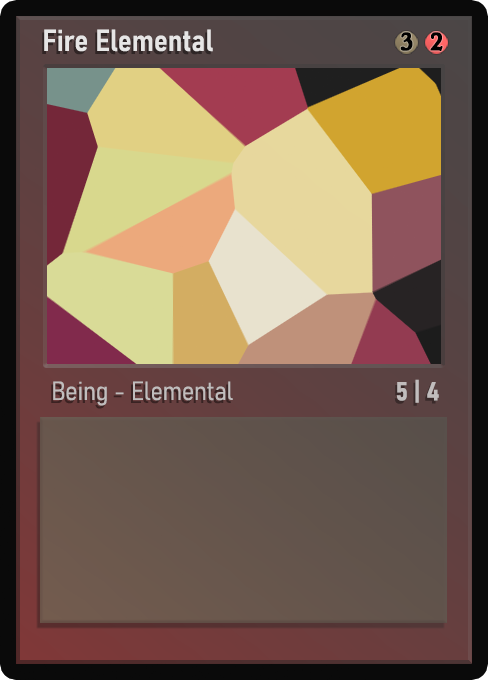
<style>
.page{position:relative;width:488px;height:680px}
.page>*{position:absolute;margin:0}
.t1{font:30px "Bahnschrift-SemiBoldSemiCondensed";color:#f2f2f2;font-weight:bold}
.t2{font:25px "WTRRoycroft";color:#000000;font-weight:bold;scale:1.09 1}
.t3{font:26px "Bahnschrift-LightSemiCondensed";color:#c8c8c8;font-weight:bold}
.t4{font:26px "Bahnschrift-BoldSemiCondensed";color:#c1bdbd;font-weight:bold}
</style>
<div class="page">
<p class="t1" style="left:44px;top:29px;width:169px;height:23px;opacity:0.9">Fire Elemental</p>
<p class="t2" style="left:400px;top:32px;width:13px;height:19px">3</p>
<p class="t2" style="left:430px;top:32px;width:13px;height:19px">2</p>
<p class="t3" style="left:53px;top:381px;width:180px;height:25px;opacity:0.9">Being - Elemental</p>
<p class="t4" style="left:396px;top:379px;width:43px;height:24px">5 | 4</p>
</div>
